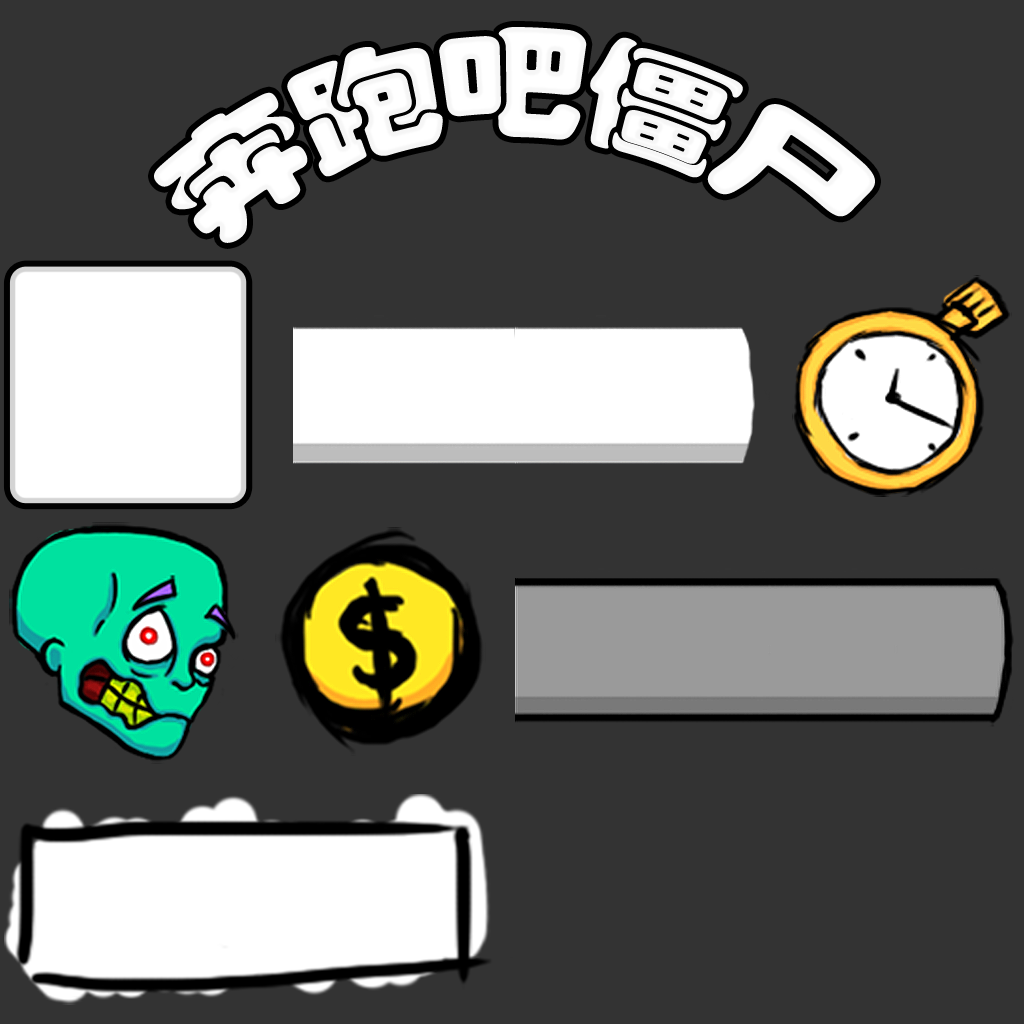
<style>
.page{position:relative;width:1024px;height:1024px;background:#333333}
.page>*{position:absolute;margin:0}
.t1{font:120px "STHupo";color:#ffffff}
</style>
<div class="page">
<p class="t1" style="left:154px;top:27px;width:721px;height:216px;text-align:center">奔跑吧僵尸</p>
</div>
